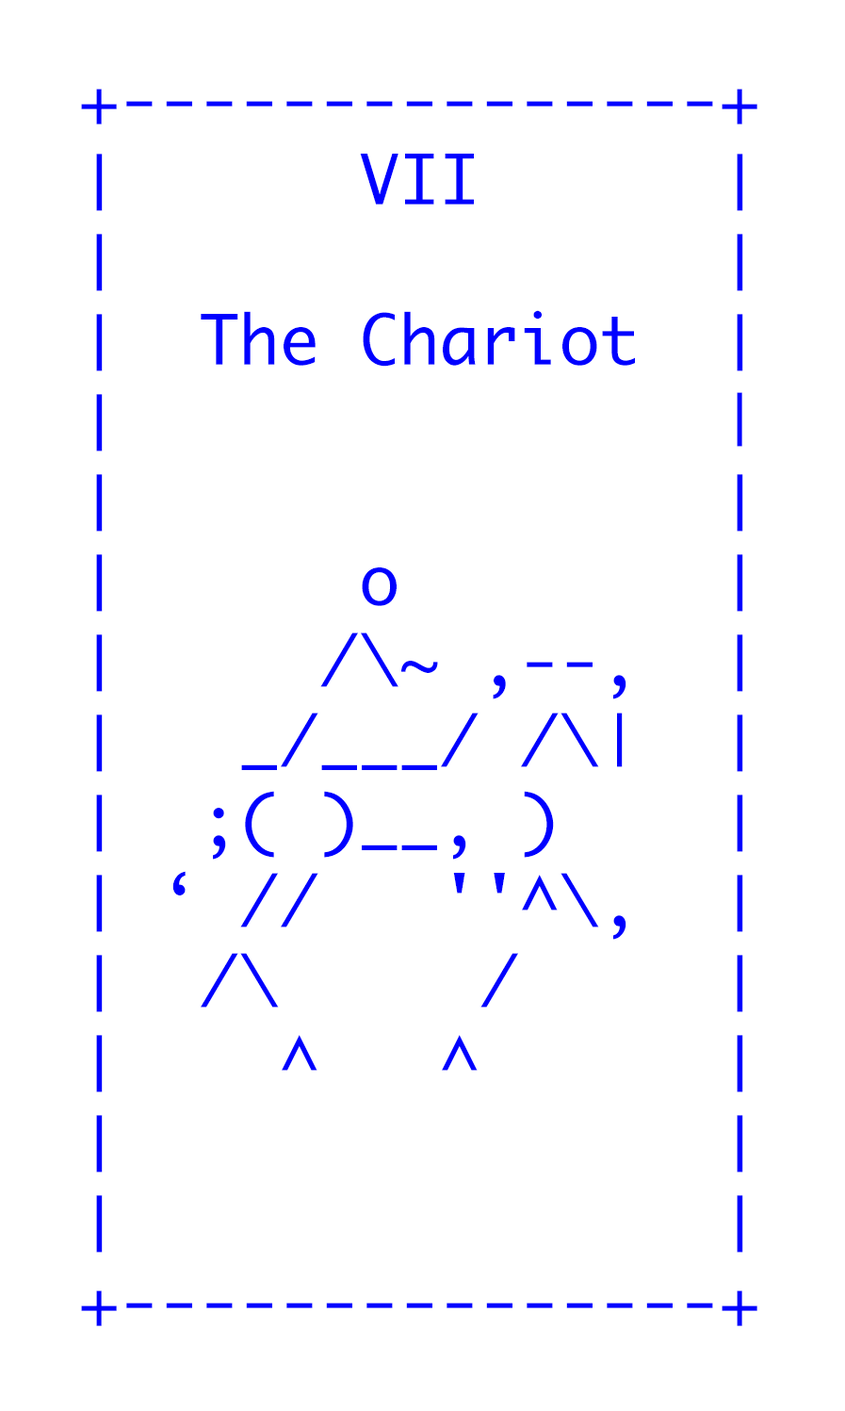
<style>
.page{position:relative;width:845px;height:1411px;background:#ffffff}
.page>*{position:absolute;margin:0}
.t1{font:66.7px "Monaco";color:#0000ff}
</style>
<div class="page">
<p class="t1" style="left:81px;top:89px;width:677px;height:1237px">+---------------+<br>│      VII      │<br>│               │<br>│  The Chariot  │<br>│               |<br>│               │<br>│      o        │<br>│     /\~ ,--,  │ <br>│   _/___/ /\|  │ <br>│  ;( )__, )    │ <br>│ ‘ //   ''^\,  │ <br>│  /\     /     │ <br>│    ^   ^      │ <br>│               │<br>│               │<br>+---------------+</p>
</div>
